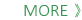
<style>
.page{position:relative;width:82px;height:20px;background:#ffffff}
.page>*{position:absolute;margin:0}
.t1{font:18px "Calibri-Light";color:#32974f}
</style>
<div class="page">
<p class="t1" style="left:24px;top:5px;width:44px;height:11px">MORE</p>
</div>
